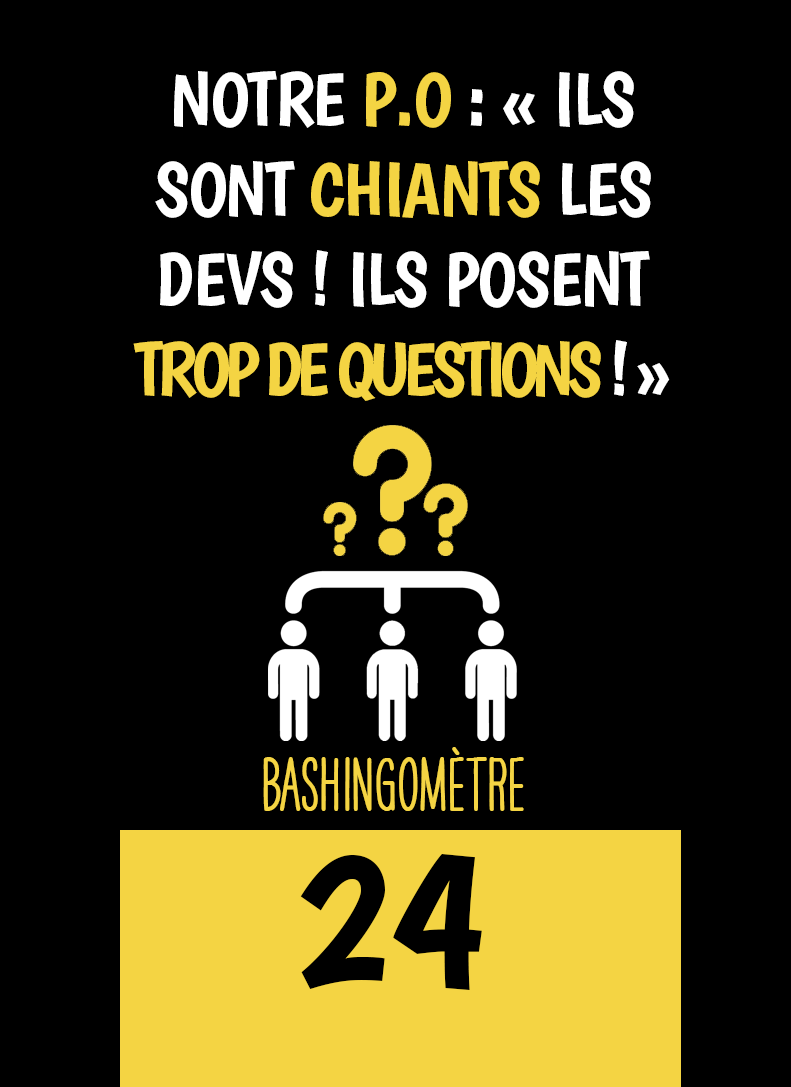
<style>
.page{position:relative;width:791px;height:1087px;background:#000000}
.page>*{position:absolute;margin:0}
.t1{font:75px "Boogaloo-Regular";letter-spacing:-0.02em;color:#ffffff}
.t2{font:75px "Boogaloo-Regular";letter-spacing:-0.02em;color:#f4d443}
.t3{font:75px "Boogaloo-Regular";letter-spacing:-0.08em;color:#f4d443}
.t4{font:75px "Boogaloo-Regular";letter-spacing:-0.08em;color:#ffffff}
.t5{font:66.7px "HAVEANICEDAYTallW04-Bold";color:#f4d443}
.t6{font:200px "Boogaloo-Regular";color:#000000}
</style>
<div class="page">
<p class="t1" style="left:133px;top:71px;width:537px;height:330px;text-align:center">NOTRE <span class="t2">P.O</span> : « ILS SONT <span class="t2">CHIANTS </span>LES DEVS ! ILS POSENT <span class="t3">TROP DE QUESTIONS </span><span class="t4">! »</span></p>
<p class="t5" style="left:263px;top:747px;width:261px;height:64px">BASHINgomètre</p>
<p class="t6" style="left:300px;top:854px;width:182px;height:136px">24</p>
</div>
